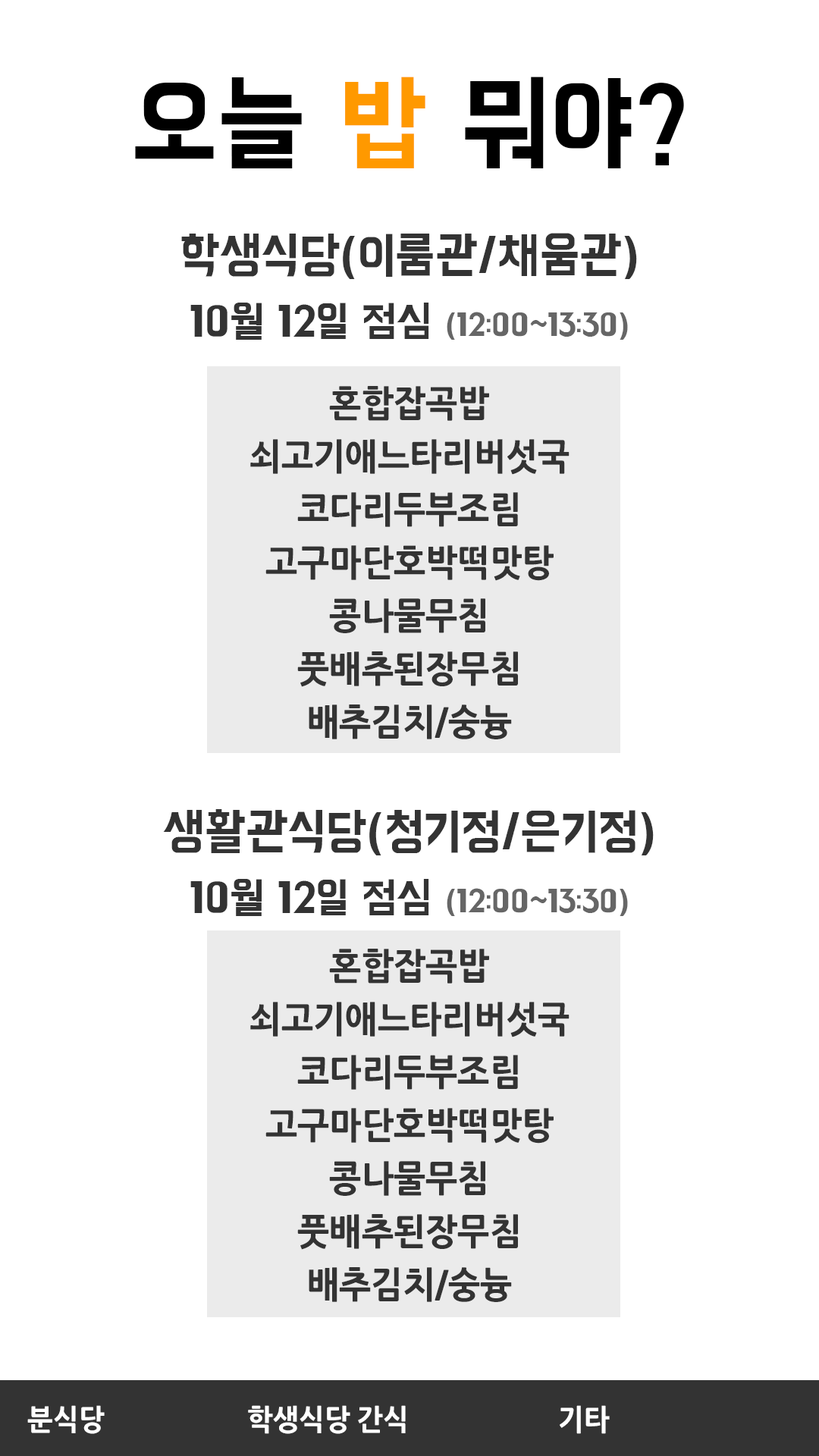
<style>
.page{position:relative;width:819px;height:1456px;background:#ffffff}
.page>*{position:absolute;margin:0}
.t1{font:108.1px "BMHANNA11yrsold";color:#000000;scale:0.95 1}
.t2{font:108.1px "BMHANNA11yrsold";color:#ff9900;scale:0.95 1}
.t3{font:50.4px "BMHANNA11yrsold";color:#333333;scale:0.95 1}
.t4{font:32.4px "BMHANNA11yrsold";color:#666666;scale:0.95 1}
.t5{font:43.2px "BMHANNA11yrsold";color:#333333;scale:0.95 1}
.t6{font:36px/53.1px "NanumGothicExtraBold";color:#333333;scale:0.95 1}
.t7{font:28.8px "NanumGothicExtraBold";color:#ffffff;scale:0.95 1}
</style>
<div class="page">
<p class="t1" style="left:135px;top:77px;width:549px;height:92px">오늘 <span class="t2">밥</span> 뭐야?</p>
<p class="t3" style="left:181px;top:233px;width:456px;height:46px">학생식당(이룸관/채움관)</p>
<p class="t4" style="left:190px;top:303px;width:438px;height:37px"><span class="t5">10월 12일 점심 </span>(12:00~13:30)</p>
<p class="t6" style="left:250px;top:386px;width:320px;height:353px;text-align:center">혼합잡곡밥<br>쇠고기애느타리버섯국<br>코다리두부조림<br>고구마단호박떡맛탕<br>콩나물무침<br>풋배추된장무침<br>배추김치/숭늉</p>
<p class="t3" style="left:163px;top:809px;width:491px;height:46px">생활관식당(청기정/은기정)</p>
<p class="t4" style="left:190px;top:879px;width:438px;height:37px"><span class="t5">10월 12일 점심 </span>(12:00~13:30)</p>
<p class="t6" style="left:250px;top:949px;width:320px;height:353px;text-align:center">혼합잡곡밥<br>쇠고기애느타리버섯국<br>코다리두부조림<br>고구마단호박떡맛탕<br>콩나물무침<br>풋배추된장무침<br>배추김치/숭늉</p>
<p class="t7" style="left:27px;top:1405px;width:78px;height:29px">분식당</p>
<p class="t7" style="left:248px;top:1405px;width:158px;height:29px">학생식당 간식</p>
<p class="t7" style="left:560px;top:1405px;width:50px;height:29px">기타</p>
</div>
